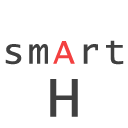
<style>
.page{position:relative;width:128px;height:128px;background:#ffffff}
.page>*{position:absolute;margin:0}
.t1{font:36px "LucidaConsole";letter-spacing:0.1em;color:#404040}
.t2{font:36px "LucidaConsole";letter-spacing:0.1em;color:#f34040}
.t3{font:60px "LucidaConsole";letter-spacing:0.1em;color:#404040}
</style>
<div class="page">
<p class="t1" style="left:5px;top:40px;width:119px;height:25px">sm<span class="t2">A</span>rt</p>
<p class="t3" style="left:50px;top:79px;width:28px;height:38px">H</p>
</div>
